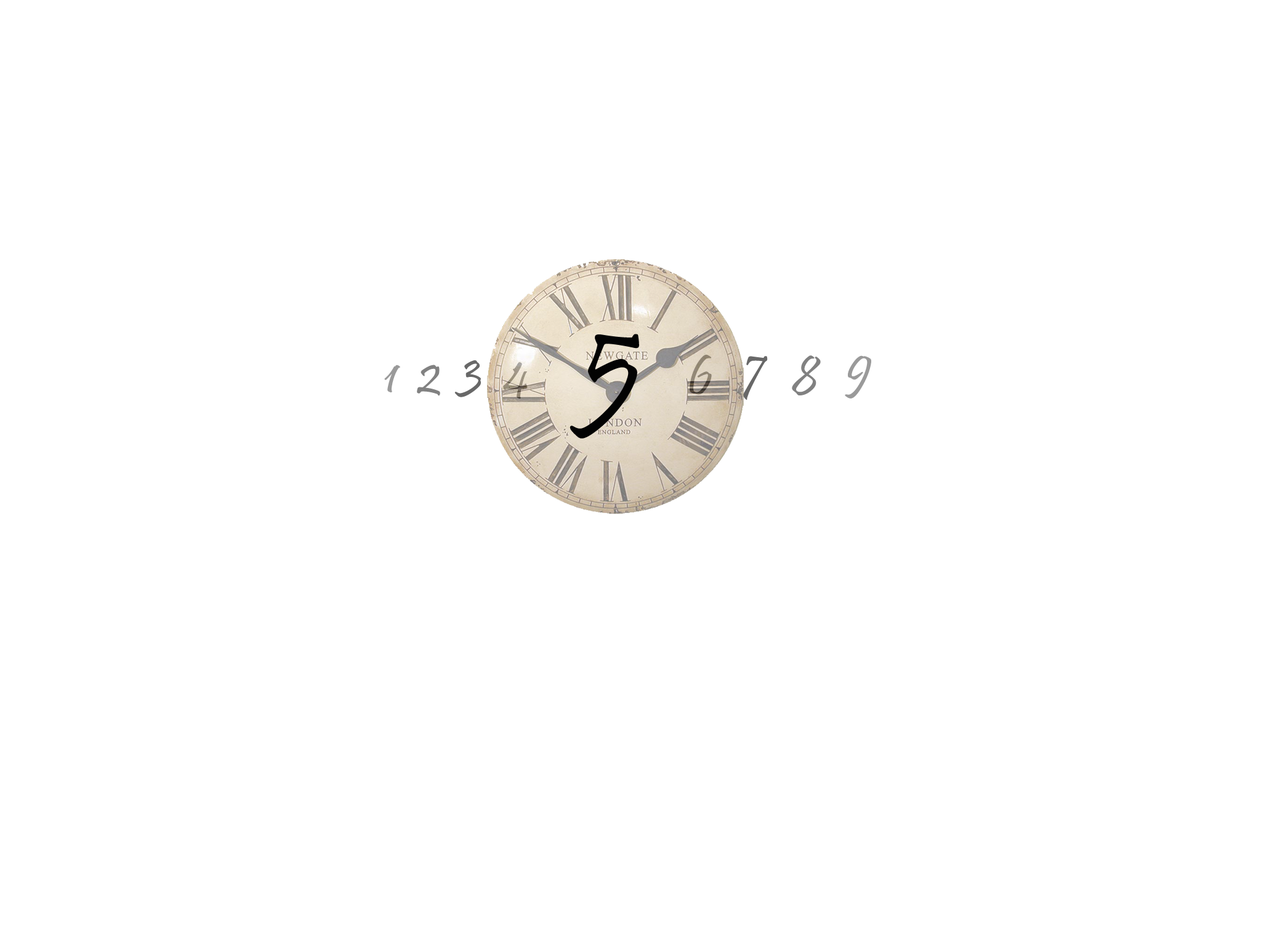
<style>
.page{position:relative;width:1261px;height:946px;background:#ffffff}
.page>*{position:absolute;margin:0}
.t1{font:135.5px "Pristina-Regular";color:#030303}
.t2{font:54.2px "Pristina-Regular";color:#9a9a9a}
.t3{font:54.2px "Pristina-Regular";color:#818181}
.t4{font:54.2px "Pristina-Regular";color:#686868}
.t5{font:54.2px "Pristina-Regular"}
</style>
<div class="page">
<p class="t1" style="left:570px;top:334px;width:69px;height:104px">5</p>
<p class="t2" style="left:384px;top:364px;width:16px;height:29px">1</p>
<p class="t3" style="left:417px;top:364px;width:23px;height:32px">2</p>
<p class="t4" style="left:454px;top:360px;width:27px;height:37px">3</p>
<p class="t5" style="left:503px;top:362px;width:24px;height:37px">4</p>
<p class="t5" style="left:690px;top:355px;width:22px;height:40px">6</p>
<p class="t4" style="left:743px;top:356px;width:25px;height:44px">7</p>
<p class="t3" style="left:792px;top:355px;width:29px;height:40px">8</p>
<p class="t2" style="left:845px;top:355px;width:26px;height:43px">9</p>
</div>
